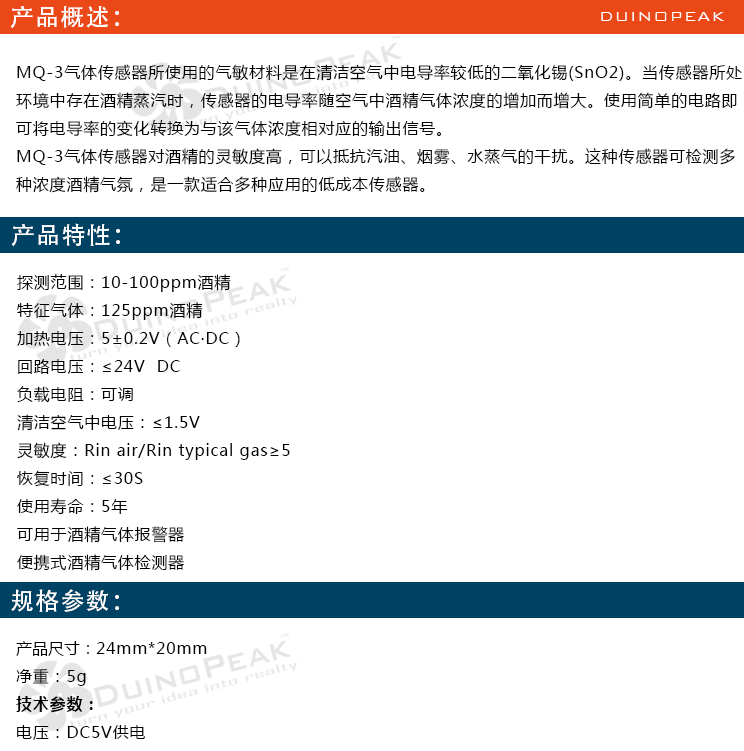
<style>
.page{position:relative;width:744px;height:751px;background:#ffffff}
.page>*{position:absolute;margin:0}
.t1{font:24px "AdobeHeitiStd-Regular";letter-spacing:0.05em;color:#ffffff}
.t2{font:18px "BankGothicBT-Light";letter-spacing:0.05em;color:#ffffff}
.t3{font:16px "MicrosoftYaHei";letter-spacing:0.05em;color:#000000}
.t4{font:16px "MicrosoftYaHei";color:#000000}
.t5{font:16px "MicrosoftYaHei-Bold";letter-spacing:0.05em;color:#000000}
</style>
<div class="page">
<p class="t1" style="left:10px;top:6px;width:109px;height:23px">产品概述：</p>
<p class="t2" style="left:601px;top:12px;width:124px;height:9px">DUINOPEAK</p>
<p class="t3" style="left:16px;top:64px;width:726px;height:129px">MQ-3气体传感器所使用的气敏材料是在清洁空气中电导率较低的二氧化锡(SnO2)。当传感器所处<br>环境中存在酒精蒸汽时，传感器的电导率随空气中酒精气体浓度的增加而增大。使用简单的电路即<br>可将电导率的变化转换为与该气体浓度相对应的输出信号。<br>MQ-3气体传感器对酒精的灵敏度高，可以抵抗汽油、烟雾、水蒸气的干扰。这种传感器可检测多<br>种浓度酒精气氛，是一款适合多种应用的低成本传感器。</p>
<p class="t1" style="left:11px;top:223px;width:109px;height:24px">产品特性：</p>
<p class="t3" style="left:17px;top:274px;width:273px;height:297px">探测范围：10-100ppm酒精<br>特征气体：125ppm酒精<br>加热电压：5±0.2V（AC·DC）<br>回路电压：≤24V  DC<br>负载电阻：可调<br>清洁空气中电压：≤1.5V<br>灵敏度：Rin air/Rin typical gas≥5<br>恢复时间：≤30S<br>使用寿命：5年<br>可用于酒精气体报警器<br>便携式酒精气体检测器</p>
<p class="t1" style="left:11px;top:589px;width:108px;height:23px">规格参数：</p>
<p class="t3" style="left:16px;top:641px;width:191px;height:99px"><span class="t4">产品尺寸：</span>24mm*20mm<br>净重：5g<br><span class="t5">技术参数：<br></span>电压：DC5V供电</p>
</div>
